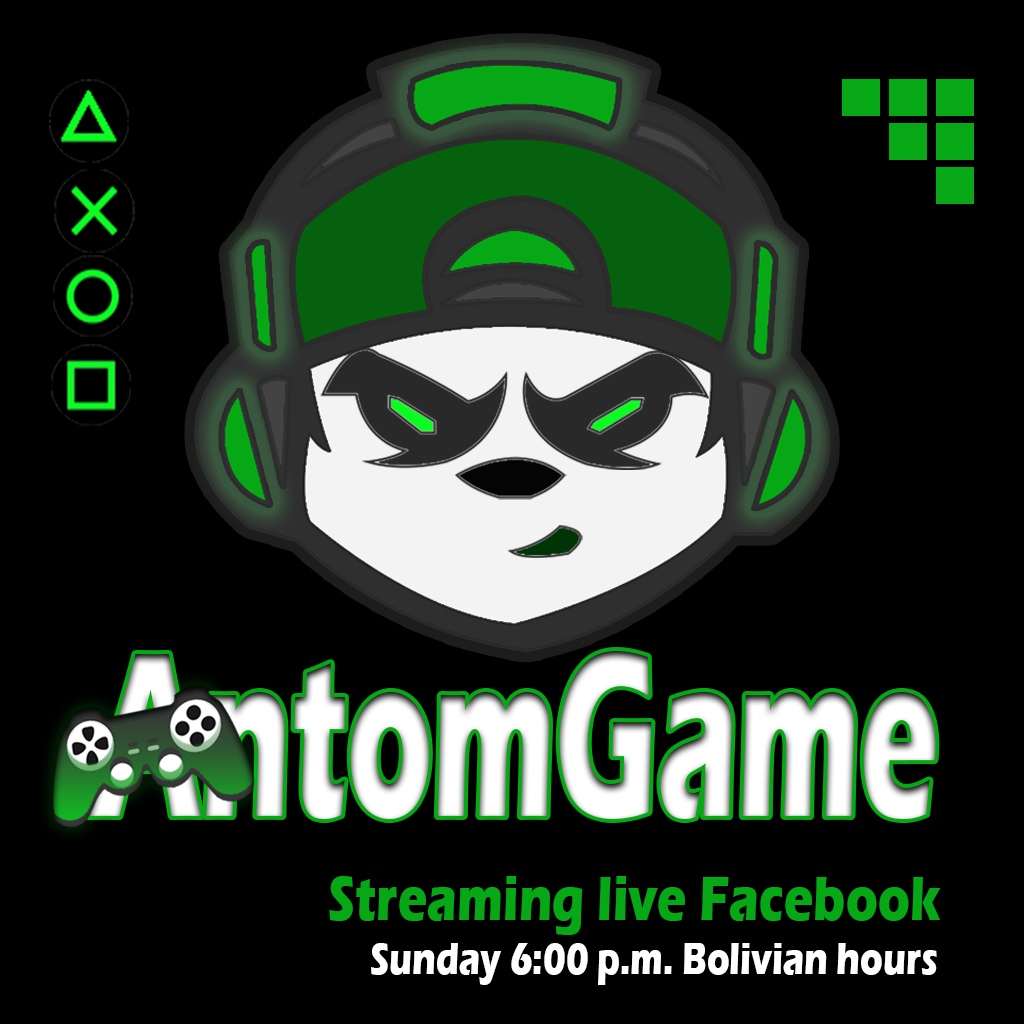
<style>
.page{position:relative;width:1024px;height:1024px;background:#000000}
.page>*{position:absolute;margin:0}
.t1{font:242.7px "ErasITC-Bold";color:#ffffff;scale:0.54 1}
.t2{font:64.7px "ErasITC-Bold";color:#06a915;scale:0.77 1}
.t3{font:45.7px "ErasITC-Bold";color:#ffffff;scale:0.77 1}
</style>
<div class="page">
<p class="t1" style="left:88px;top:651px;width:848px;height:168px">AntomGame</p>
<p class="t2" style="left:329px;top:876px;width:612px;height:59px">Streaming live Facebook</p>
<p class="t3" style="left:371px;top:943px;width:566px;height:42px">Sunday 6:00 p.m. Bolivian hours</p>
</div>
